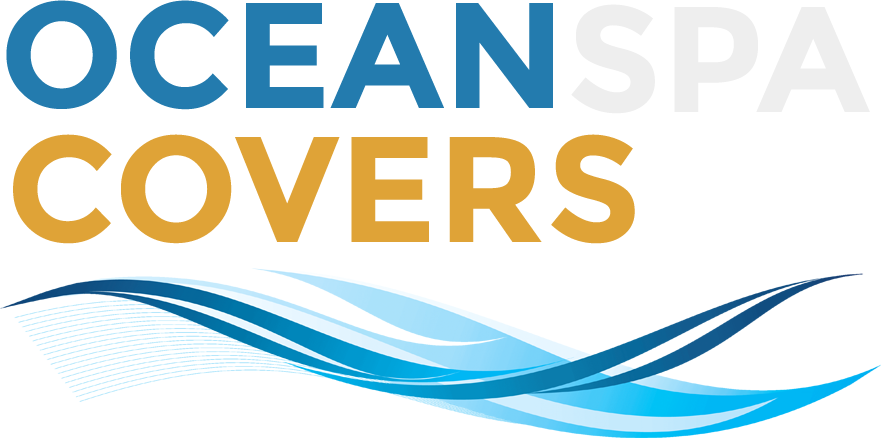
<style>
.page{position:relative;width:881px;height:438px;background:#ffffff}
.page>*{position:absolute;margin:0}
.t1{font:150px "Montserrat-Bold";color:#237bae}
.t2{font:150px "Montserrat-Bold";color:#eeeeee}
.t3{font:150px "Montserrat-Bold";color:#dfa337}
</style>
<div class="page">
<p class="t1" style="left:6px;top:0px;width:547px;height:110px">OCEAN</p>
<p class="t2" style="left:571px;top:4px;width:299px;height:110px">SPA</p>
<p class="t3" style="left:13px;top:134px;width:622px;height:110px">COVERS</p>
</div>
